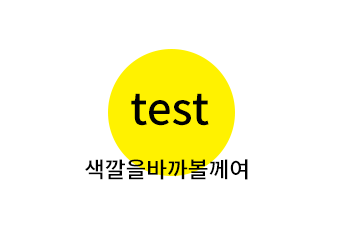
<style>
.page{position:relative;width:343px;height:225px;background:#ffffff}
.page>*{position:absolute;margin:0}
.t1{font:44px "NotoSansKR-Medium";color:#000000}
.t2{font:22.3px "NotoSansKR-Medium";color:#000000}
</style>
<div class="page">
<p class="t1" style="left:131px;top:93px;width:78px;height:33px">test</p>
<p class="t2" style="left:85px;top:159px;width:163px;height:21px">색깔을바까볼께여</p>
</div>
